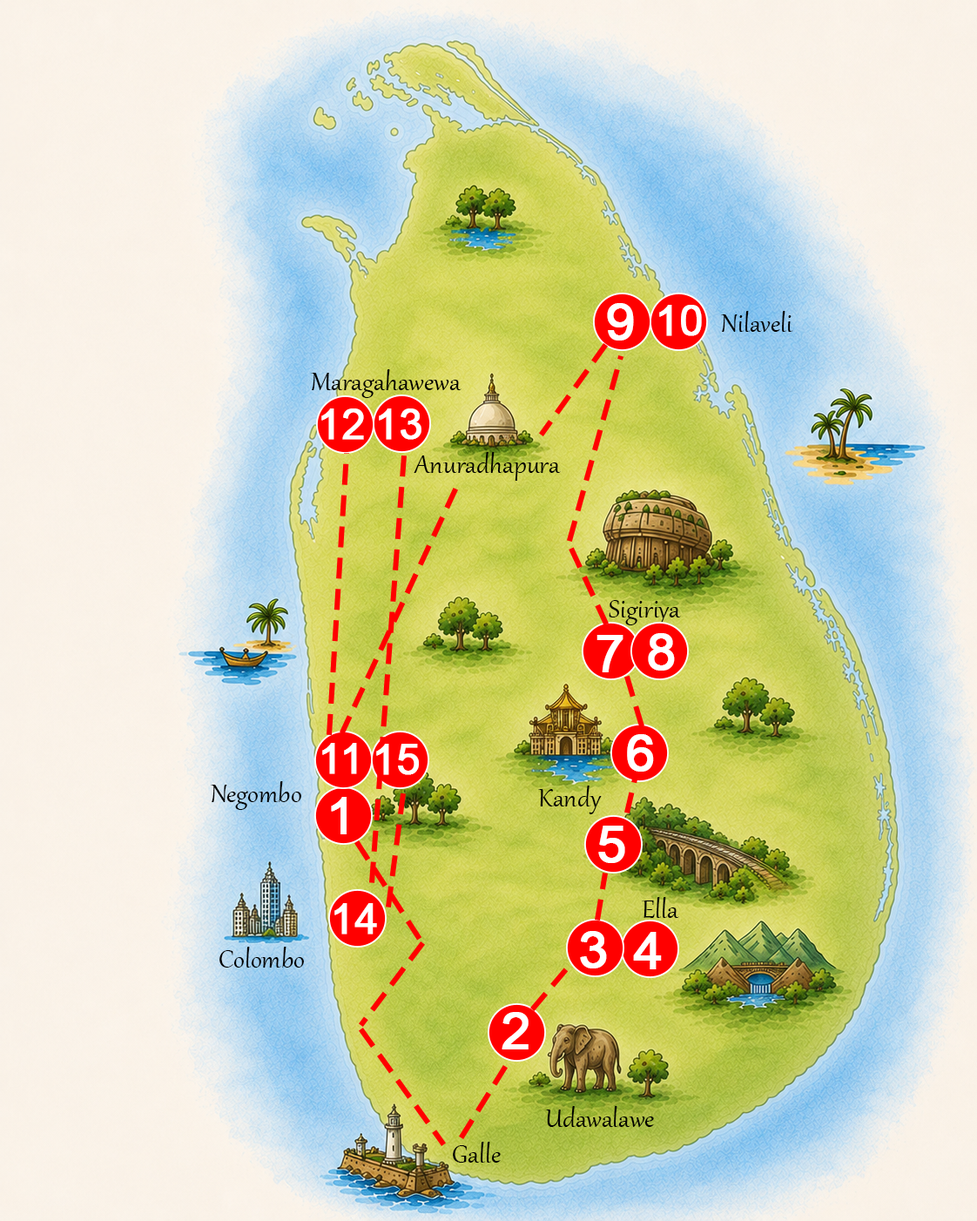
<style>
.page{position:relative;width:977px;height:1221px}
.page>*{position:absolute;margin:0}
.t1{font:52.2px "ArialMT";color:#ffffff;font-weight:bold}
.t2{font:41.8px "ArialMT";color:#ffffff;font-weight:bold}
.t3{font:31.3px "Gabriola";color:#000000}
</style>
<div class="page">
<p class="t1" style="left:607px;top:303px;width:27px;height:37px">9</p>
<p class="t2" style="left:659px;top:305px;width:43px;height:31px">10</p>
<p class="t3" style="left:721px;top:311px;width:72px;height:21px">Nilaveli</p>
<p class="t3" style="left:311px;top:369px;width:150px;height:29px">Maragahawewa</p>
<p class="t2" style="left:321px;top:408px;width:43px;height:32px">12</p>
<p class="t2" style="left:379px;top:408px;width:42px;height:32px">13</p>
<p class="t3" style="left:414px;top:452px;width:147px;height:29px">Anuradhapura</p>
<p class="t3" style="left:609px;top:600px;width:72px;height:25px">Sigiriya</p>
<p class="t1" style="left:596px;top:635px;width:27px;height:37px">7</p>
<p class="t1" style="left:648px;top:633px;width:27px;height:37px">8</p>
<p class="t1" style="left:627px;top:734px;width:27px;height:37px">6</p>
<p class="t2" style="left:322px;top:743px;width:35px;height:31px">11</p>
<p class="t2" style="left:376px;top:744px;width:43px;height:31px">15</p>
<p class="t3" style="left:211px;top:781px;width:90px;height:29px">Negombo</p>
<p class="t3" style="left:538px;top:785px;width:64px;height:29px">Kandy</p>
<p class="t1" style="left:331px;top:797px;width:16px;height:37px">1</p>
<p class="t1" style="left:598px;top:825px;width:27px;height:38px">5</p>
<p class="t2" style="left:334px;top:903px;width:43px;height:31px">14</p>
<p class="t3" style="left:642px;top:897px;width:37px;height:21px">Ella</p>
<p class="t1" style="left:580px;top:931px;width:27px;height:37px">3</p>
<p class="t1" style="left:633px;top:932px;width:29px;height:37px">4</p>
<p class="t3" style="left:219px;top:946px;width:85px;height:21px">Colombo</p>
<p class="t1" style="left:501px;top:1012px;width:27px;height:37px">2</p>
<p class="t3" style="left:545px;top:1106px;width:109px;height:21px">Udawalawe</p>
<p class="t3" style="left:453px;top:1141px;width:48px;height:21px">Galle</p>
</div>
